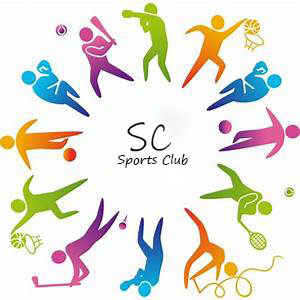
<style>
.page{position:relative;width:300px;height:300px;background:#fdfdfd}
.page>*{position:absolute;margin:0}
.t1{font:12px "SegoePrint";color:#0a0505}
.t2{font:16px "SegoePrint";color:#0a0505}
.t3{font:40px "InkFree";color:#0a0505}
</style>
<div class="page">
<p class="t1" style="left:118px;top:122px;width:70px;height:46px"><span class="t2">  </span><span class="t3">SC<br></span> Sports Club</p>
</div>
